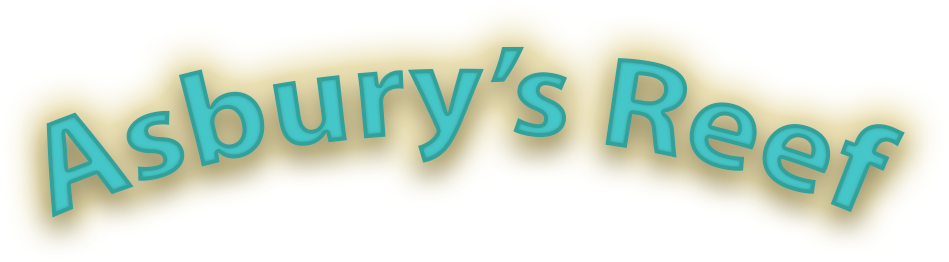
<style>
.page{position:relative;width:949px;height:262px;background:#ffffff}
.page>*{position:absolute;margin:0}
.t1{font:131.4px "MyriadPro-Bold"}
</style>
<div class="page">
<p class="t1" style="left:46px;top:46px;width:859px;height:172px">Asbury’s Reef</p>
</div>
